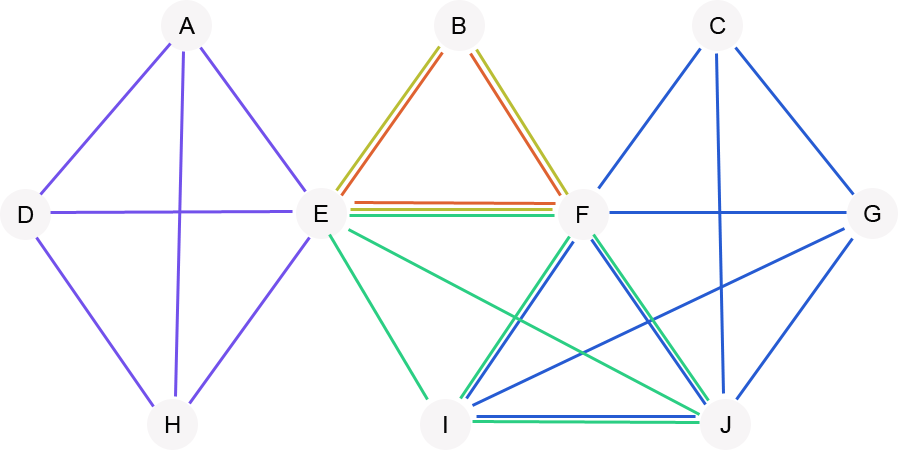
<style>
.page{position:relative;width:898px;height:450px;background:#ffffff}
.page>*{position:absolute;margin:0}
.t1{font:24px "ArialMT";color:#050505}
</style>
<div class="page">
<p class="t1" style="left:452px;top:17px;width:14px;height:17px">B</p>
<p class="t1" style="left:710px;top:17px;width:16px;height:17px">C</p>
<p class="t1" style="left:18px;top:206px;width:16px;height:17px">D</p>
<p class="t1" style="left:314px;top:205px;width:14px;height:17px">E</p>
<p class="t1" style="left:577px;top:206px;width:12px;height:17px">F</p>
<p class="t1" style="left:864px;top:205px;width:17px;height:17px">G</p>
<p class="t1" style="left:165px;top:416px;width:15px;height:17px">H</p>
<p class="t1" style="left:444px;top:416px;width:3px;height:17px">I</p>
<p class="t1" style="left:720px;top:416px;width:11px;height:17px">J</p>
</div>
